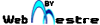
<style>
.page{position:relative;width:100px;height:25px;background:#ffffff}
.page>*{position:absolute;margin:0}
.t1{font:8px "PocketCalculator";color:#000000;font-weight:bold;scale:1.27 1}
.t2{font:12px "PocketCalculator";color:#000000;font-weight:bold;scale:1.25 1}
.t3{font:12px "PocketCalculator";color:#000000;font-weight:bold;scale:1.85 1}
</style>
<div class="page">
<p class="t1" style="left:44px;top:0px;width:10px;height:7px">BY</p>
<p class="t2" style="left:2px;top:15px;width:26px;height:9px">Web</p>
<p class="t3" style="left:55px;top:16px;width:44px;height:8px">estre</p>
</div>
